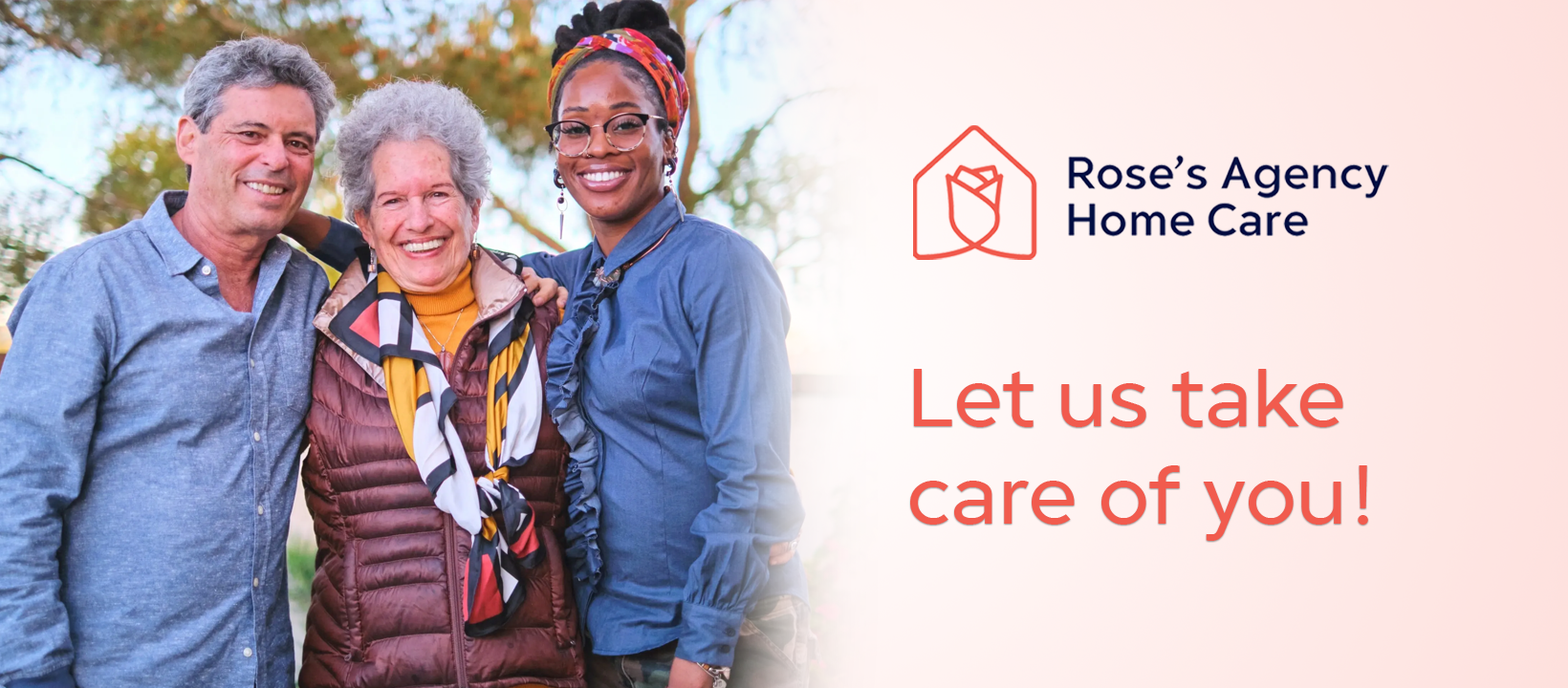
<style>
.page{position:relative;width:1568px;height:688px}
.page>*{position:absolute;margin:0}
.t1{font:81.7px "GuerrerNormal400";color:#f15b4e}
</style>
<div class="page">
<p class="t1" style="left:910px;top:369px;width:458px;height:172px">Let us take <br>care of you!</p>
</div>
